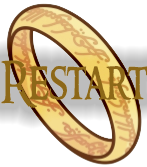
<style>
.page{position:relative;width:147px;height:167px;background:#ffffff}
.page>*{position:absolute;margin:0}
.t1{font:53.3px "RingbearerMedium";color:#8d6818;scale:0.74 1}
</style>
<div class="page">
<p class="t1" style="left:1px;top:60px;width:147px;height:48px">Restart</p>
</div>
